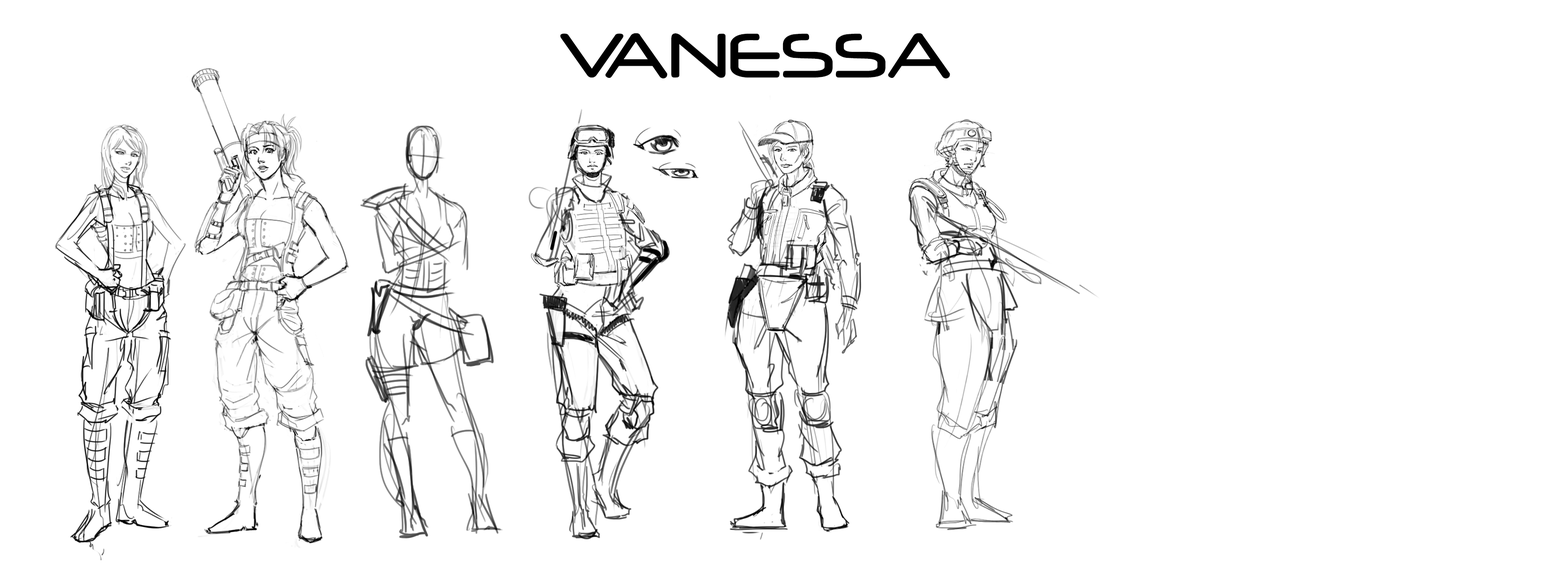
<style>
.page{position:relative;width:1568px;height:588px;background:#ffffff}
.page>*{position:absolute;margin:0}
.t1{font:73.5px "Neuropol";letter-spacing:0.005em;color:#000000}
</style>
<div class="page">
<p class="t1" style="left:560px;top:33px;width:390px;height:45px">VANESSA</p>
</div>
